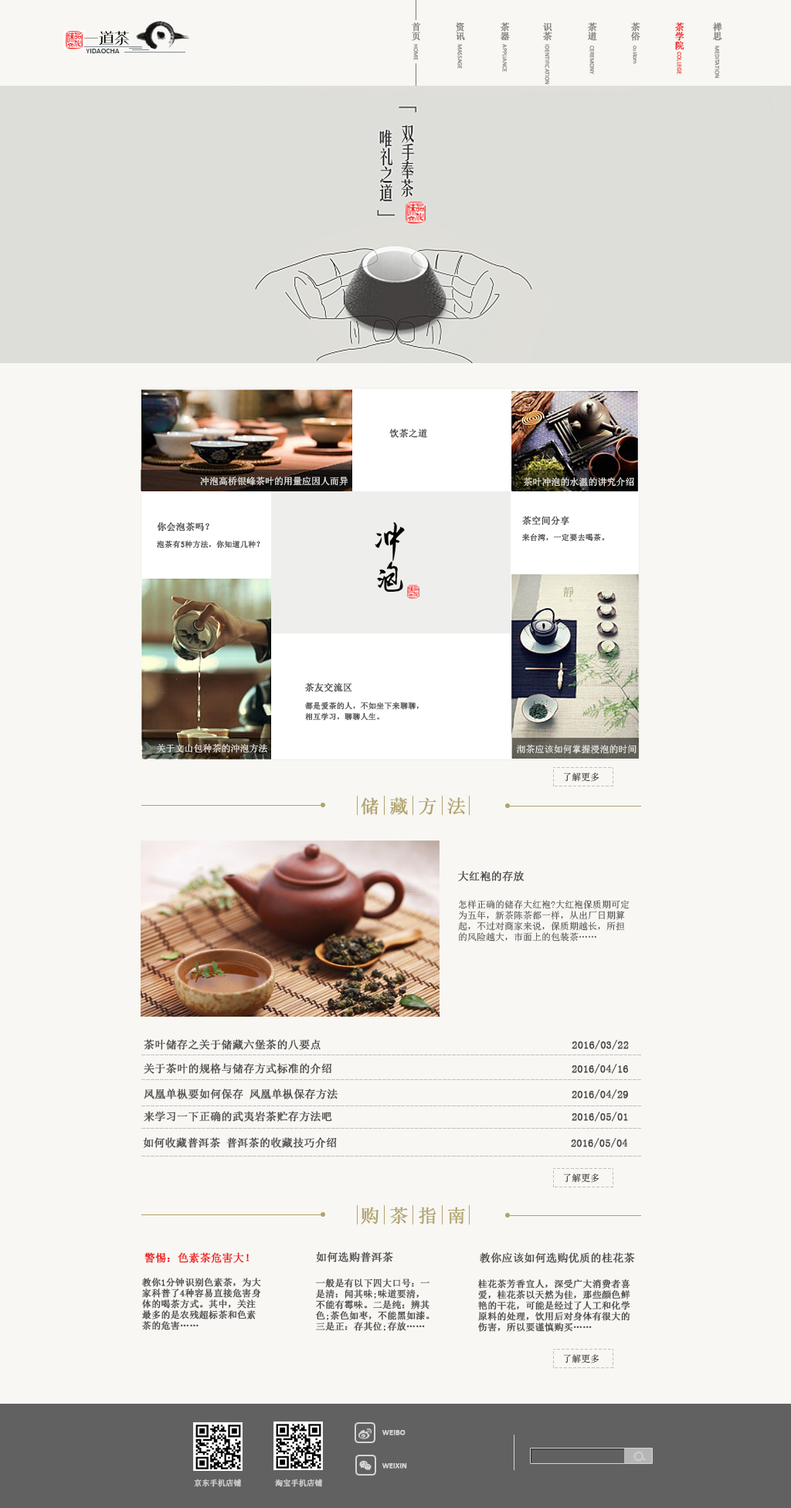
<style>
.page{position:relative;width:791px;height:1508px;background:#f8f7f3}
.page>*{position:absolute;margin:0}
.t1{font:9.3px/9.3px "SimSun";color:#7b7b7b;font-weight:bold}
.t2{font:9.3px/9.3px "SimSun";color:#ef1414;font-weight:bold}
.t3{font:7.7px "Calibri";color:#343b43}
.t4{font:6.2px "Calibri";color:#7b7b7b}
.t5{font:6.2px "Calibri"}
.t6{font:9.3px "SimSun";color:#494848;font-weight:bold}
.t7{font:9.3px "SimSun";color:#eeeeec}
.t8{font:7.7px "SimSun";color:#494848;font-weight:bold}
.t9{font:7.7px/10.8px "SimSun";color:#494848;font-weight:bold}
.t10{font:9.3px "SimSun"}
.t11{font:18.5px "SimSun";color:#b0a36c;font-weight:bold}
.t12{font:10.8px "SimSun";color:#494848;font-weight:bold}
.t13{font:9.3px/10.8px "SimSun";color:#494848}
.t14{font:10.8px "SimSun";color:#ef1414;font-weight:bold}
.t15{font:9.3px/10.8px "SimSun";color:#494848;font-weight:bold}
.t16{font:7.7px "Calibri";color:#d5d4d4;font-weight:bold}
.t17{font:7.7px "SimSun";color:#d5d4d4;font-weight:bold}
</style>
<div class="page">
<p class="t1" style="left:412px;top:22px;width:9px;height:19px">首<br>页</p>
<p class="t1" style="left:456px;top:22px;width:9px;height:19px">资<br>讯</p>
<p class="t1" style="left:500px;top:22px;width:10px;height:19px">茶<br>器</p>
<p class="t1" style="left:542px;top:22px;width:10px;height:19px">识<br>茶</p>
<p class="t1" style="left:587px;top:22px;width:10px;height:19px">茶<br>道</p>
<p class="t1" style="left:630px;top:22px;width:10px;height:19px">茶<br>俗</p>
<p class="t2" style="left:674px;top:22px;width:10px;height:28px">茶<br>学<br>院</p>
<p class="t1" style="left:713px;top:22px;width:9px;height:19px">禅<br>思</p>
<p class="t3" style="left:86px;top:49px;width:34px;height:4px">YIDAOCHA</p>
<p class="t4" style="left:413px;top:44px;width:5px;height:16px;rotate:90deg">HOME</p>
<p class="t4" style="left:457px;top:44px;width:5px;height:25px;rotate:90deg">MASSAGE</p>
<p class="t4" style="left:502px;top:44px;width:5px;height:28px;rotate:90deg">APPLIANCE</p>
<p class="t4" style="left:545px;top:44px;width:4px;height:40px;rotate:90deg">IDENTIFICATION</p>
<p class="t4" style="left:589px;top:46px;width:5px;height:28px;rotate:90deg">CEREMONY</p>
<p class="t5" style="left:633px;top:46px;width:4px;height:17px;rotate:90deg">custom</p>
<p class="t5" style="left:677px;top:52px;width:4px;height:22px;rotate:90deg">COLLEGE</p>
<p class="t4" style="left:714px;top:46px;width:5px;height:32px;rotate:90deg">MEDITATION</p>
<p class="t6" style="left:389px;top:429px;width:38px;height:9px">饮茶之道</p>
<p class="t7" style="left:200px;top:477px;width:148px;height:9px">冲泡高桥银峰茶叶的用量应因人而异</p>
<p class="t7" style="left:524px;top:477px;width:110px;height:10px">茶叶冲泡的水温的讲究介绍</p>
<p class="t6" style="left:522px;top:516px;width:47px;height:9px">茶空间分享</p>
<p class="t6" style="left:157px;top:522px;width:52px;height:9px">你会泡茶吗？</p>
<p class="t8" style="left:521px;top:533px;width:84px;height:8px">来台湾，一定要去喝茶。</p>
<p class="t8" style="left:157px;top:540px;width:103px;height:8px">泡茶有5种方法，你知道几种？</p>
<p class="t6" style="left:304px;top:683px;width:48px;height:9px">茶友交流区</p>
<p class="t9" style="left:305px;top:701px;width:114px;height:20px">都是爱茶的人，不如坐下来聊聊，<br>相互学习，聊聊人生。</p>
<p class="t7" style="left:157px;top:744px;width:110px;height:9px">关于文山包种茶的沖泡方法</p>
<p class="t7" style="left:517px;top:745px;width:119px;height:9px">沏茶应该如何掌握浸泡的时间</p>
<p class="t10" style="left:564px;top:772px;width:35px;height:10px">了解更多</p>
<p class="t11" style="left:361px;top:797px;width:105px;height:18px">储 藏 方 法</p>
<p class="t12" style="left:458px;top:870px;width:66px;height:11px">大红袍的存放</p>
<p class="t13" style="left:458px;top:900px;width:171px;height:42px">怎样正确的储存大红袍?大红袍保质期可定<br>为五年，新茶陈茶都一样，从出厂日期算<br>起，不过对商家来说，保质期越长，所担<br>的风险越大，市面上的包装茶……</p>
<p class="t12" style="left:144px;top:1039px;width:485px;height:11px">茶叶储存之关于储藏六堡茶的八要点                                            2016/03/22</p>
<p class="t12" style="left:144px;top:1063px;width:484px;height:11px">关于茶叶的规格与储存方式标准的介绍                                          2016/04/16</p>
<p class="t12" style="left:144px;top:1088px;width:484px;height:11px">凤凰单枞要如何保存 凤凰单枞保存方法                                         2016/04/29</p>
<p class="t12" style="left:144px;top:1111px;width:484px;height:10px">来学习一下正确的武夷岩茶贮存方法吧                                          2016/05/01</p>
<p class="t12" style="left:143px;top:1137px;width:485px;height:11px">如何收藏普洱茶 普洱茶的收藏技巧介绍                                         2016/05/04</p>
<p class="t10" style="left:564px;top:1173px;width:35px;height:10px">了解更多</p>
<p class="t11" style="left:361px;top:1206px;width:104px;height:18px">购 茶 指 南</p>
<p class="t14" style="left:144px;top:1252px;width:105px;height:11px">警惕：色素茶危害大！</p>
<p class="t12" style="left:316px;top:1251px;width:77px;height:11px">如何选购普洱茶</p>
<p class="t12" style="left:480px;top:1252px;width:155px;height:11px">教你应该如何选购优质的桂花茶</p>
<p class="t15" style="left:141px;top:1278px;width:120px;height:52px">教你1分钟识别色素茶，为大<br>家科普了4种容易直接危害身<br>体的喝茶方式。其中，关注<br>最多的是农残超标茶和色素<br>茶的危害……</p>
<p class="t15" style="left:316px;top:1278px;width:113px;height:53px">一般是有以下四大口号：一<br>是清：闻其味;味道要清，<br>不能有霉味。二是纯：辨其<br>色;茶色如枣，不能黑如漆。<br>三是正：存其位;存放……</p>
<p class="t15" style="left:477px;top:1279px;width:153px;height:53px">桂花茶芳香宜人，深受广大消费者喜<br>爱，桂花茶以天然为佳，那些颜色鲜<br>艳的干花，可能是经过了人工和化学<br>原料的处理，饮用后对身体有很大的<br>伤害，所以要谨慎购买……</p>
<p class="t10" style="left:564px;top:1354px;width:35px;height:9px">了解更多</p>
<p class="t16" style="left:382px;top:1430px;width:23px;height:5px">WEIBO</p>
<p class="t16" style="left:382px;top:1463px;width:25px;height:5px">WEIXIN</p>
<p class="t17" style="left:194px;top:1478px;width:47px;height:9px">京东手机店铺</p>
<p class="t17" style="left:275px;top:1478px;width:47px;height:9px">淘宝手机店铺</p>
</div>
